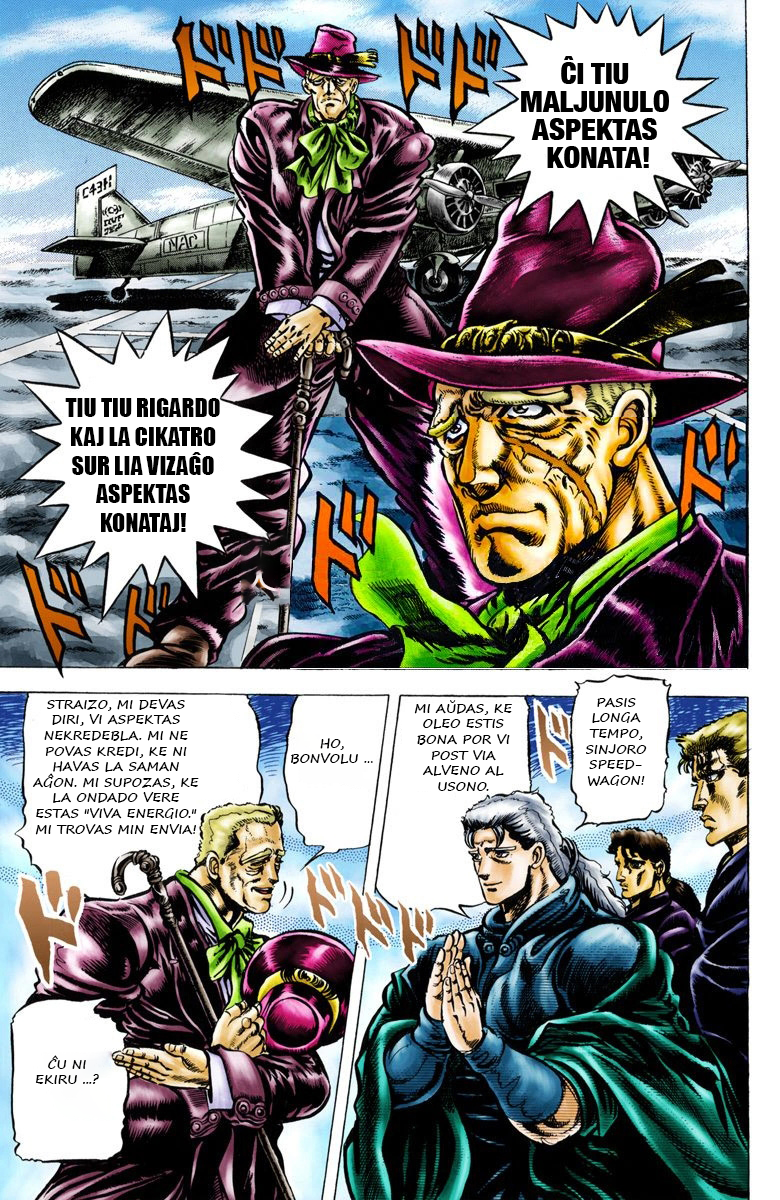
<style>
.page{position:relative;width:780px;height:1200px}
.page>*{position:absolute;margin:0}
.t1{font:24px "Impact";color:#000000}
.t2{font:13px "SegoePrint-Bold";color:#000000}
</style>
<div class="page">
<p class="t1" style="left:65px;top:398px;width:155px;height:134px;text-align:center">TIU TIU RIGARDO KAJ LA CIKATRO SUR LIA VIZAĜO ASPEKTAS KONATAJ!</p>
<p class="t2" style="left:32px;top:699px;width:167px;height:136px;text-align:center">STRAIZO, MI DEVAS DIRI, VI ASPEKTAS NEKREDEBLA. MI NE POVAS KREDI, KE NI HAVAS LA SAMAN AĜON. MI SUPOZAS, KE LA ONDADO VERE ESTAS "VIVA ENERGIO." MI TROVAS MIN ENVIA!</p>
<p class="t2" style="left:414px;top:700px;width:98px;height:91px;text-align:center">MI AŬDAS, KE OLEO ESTIS BONA POR VI POST VIA ALVENO AL<br>USONO.</p>
<p class="t2" style="left:586px;top:698px;width:61px;height:88px;text-align:center">PASIS LONGA TEMPO, SINJORO SPEED-<br>WAGON!</p>
<p class="t2" style="left:291px;top:738px;width:82px;height:26px;text-align:center">HO, <br>BONVOLU …</p>
<p class="t2" style="left:35px;top:1055px;width:64px;height:29px;text-align:center">ĈU NI <br>EKIRU ...?</p>
</div>
